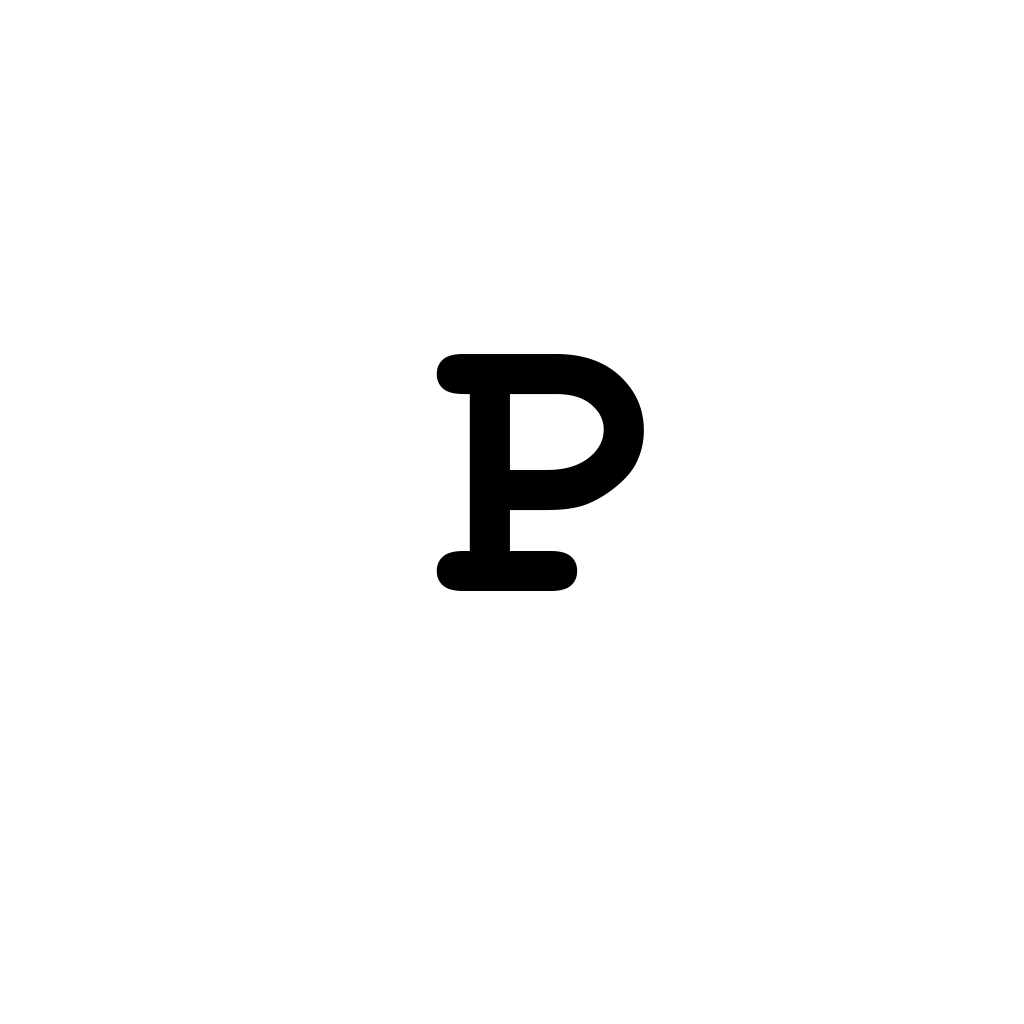
<style>
.page{position:relative;width:1024px;height:1024px;background:#ffffff}
.page>*{position:absolute;margin:0}
.t1{font:400px "CourierNewPS-BoldMT";color:#000000}
</style>
<div class="page">
<p class="t1" style="left:436px;top:354px;width:208px;height:237px">P</p>
</div>
